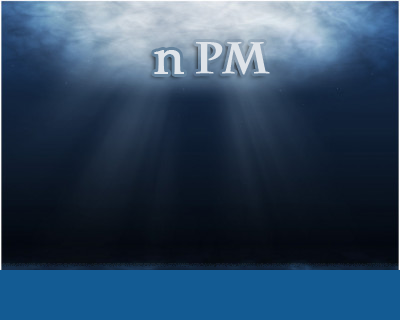
<style>
.page{position:relative;width:400px;height:320px}
.page>*{position:absolute;margin:0}
.t1{font:50px "PalatinoLinotype-Roman";letter-spacing:-0.05em;color:#dee3e9;font-weight:bold}
.t2{font:44px "CharlemagneStd-Bold";letter-spacing:-0.05em;color:#dee3e9;font-weight:bold}
</style>
<div class="page">
<p class="t1" style="left:154px;top:50px;width:30px;height:24px">n</p>
<p class="t2" style="left:196px;top:42px;width:74px;height:33px">PM</p>
</div>
